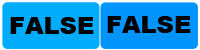
<style>
.page{position:relative;width:200px;height:50px;background:#0195fc}
.page>*{position:absolute;margin:0}
.t1{font:24px "Arial-Black";color:#000000}
</style>
<div class="page">
<p class="t1" style="left:10px;top:17px;width:84px;height:17px">FALSE</p>
<p class="t1" style="left:107px;top:16px;width:84px;height:17px">FALSE</p>
</div>
